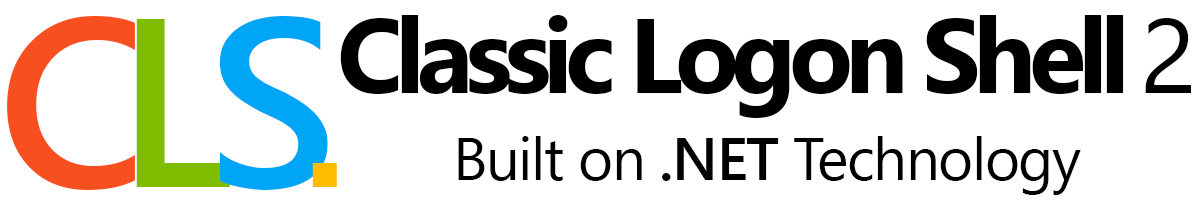
<style>
.page{position:relative;width:1200px;height:210px;background:#ffffff}
.page>*{position:absolute;margin:0}
.t1{font:240px "SegoeUI-Semibold";letter-spacing:-0.1em;color:#f84f1f}
.t2{font:240px "SegoeUI-Semibold";letter-spacing:-0.1em;color:#80bd00}
.t3{font:240px "SegoeUI-Semibold";letter-spacing:-0.2em;color:#00a6f5}
.t4{font:240px "Share-TechMono";letter-spacing:-0.1em;color:#ffbd00}
.t5{font:105.3px "SegoeUI-Bold";letter-spacing:-0.075em;color:#000000}
.t6{font:105.3px "SegoeUI";letter-spacing:-0.1em;color:#000000}
.t7{font:60px "SegoeUI";letter-spacing:-0.025em;color:#000000}
.t8{font:60px "SegoeUI-Semibold";letter-spacing:-0.025em;color:#000000}
</style>
<div class="page">
<p class="t1" style="left:7px;top:15px;width:330px;height:175px">C<span class="t2">L</span><span class="t3">S</span><span class="t4">.</span></p>
<p class="t5" style="left:340px;top:15px;width:851px;height:103px">Classic Logon Shell <span class="t6">2</span></p>
<p class="t7" style="left:458px;top:136px;width:623px;height:59px">Built on <span class="t8">.NET</span> Technology</p>
</div>
